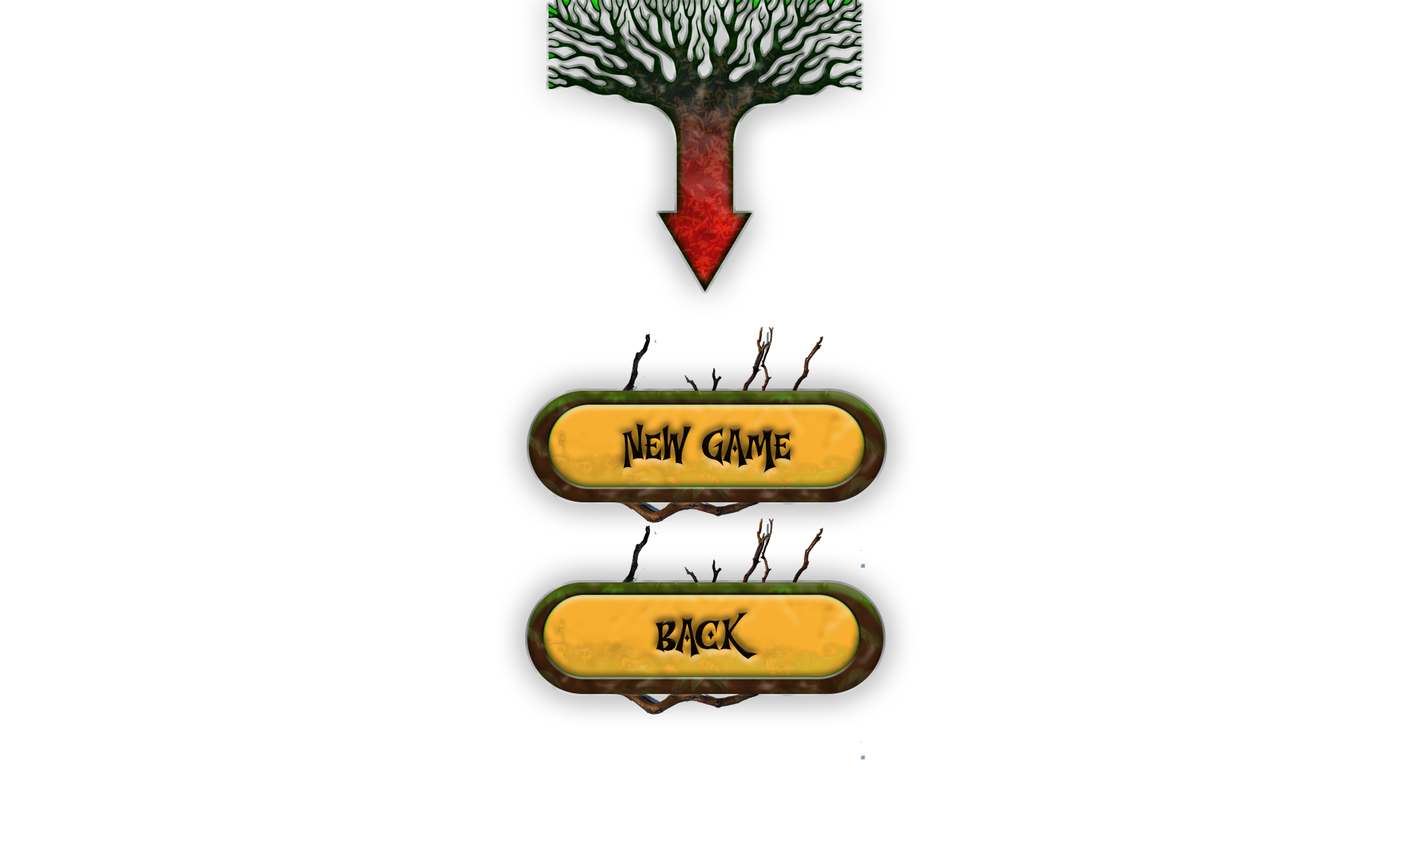
<style>
.page{position:relative;width:1410px;height:846px;background:#ffffff}
.page>*{position:absolute;margin:0}
.t1{font:44.1px "TreeNight";letter-spacing:-0.025em;color:#0e0901}
</style>
<div class="page">
<p class="t1" style="left:622px;top:423px;width:169px;height:51px">new game</p>
<p class="t1" style="left:655px;top:612px;width:103px;height:47px">back</p>
</div>
